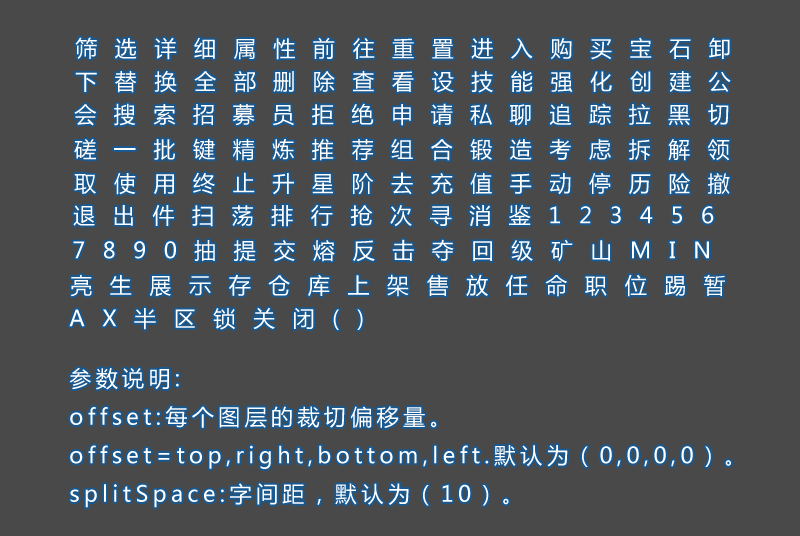
<style>
.page{position:relative;width:800px;height:536px;background:#494949}
.page>*{position:absolute;margin:0}
.t1{font:22px "MicrosoftYaHei";letter-spacing:0.8em;color:#ffffff}
.t2{font:22px "MicrosoftYaHei";letter-spacing:0.2em;color:#ffffff}
</style>
<div class="page">
<p class="t1" style="left:75px;top:37px;width:655px;height:23px">筛选详细属性前往重置进入购买宝石卸</p>
<p class="t1" style="left:75px;top:71px;width:656px;height:22px">下替换全部删除查看设技能强化创建公</p>
<p class="t1" style="left:74px;top:103px;width:655px;height:23px">会搜索招募员拒绝申请私聊追踪拉黑切</p>
<p class="t1" style="left:74px;top:138px;width:656px;height:23px">磋一批键精炼推荐组合锻造考虑拆解领</p>
<p class="t1" style="left:74px;top:172px;width:656px;height:23px">取使用终止升星阶去充值手动停历险撤</p>
<p class="t1" style="left:73px;top:204px;width:641px;height:23px">退出件扫荡排行抢次寻消鉴123456</p>
<p class="t1" style="left:73px;top:239px;width:636px;height:23px">7890抽提交熔反击夺回级矿山MIN</p>
<p class="t1" style="left:70px;top:274px;width:655px;height:23px">亮生展示存仓库上架售放任命职位踢暂</p>
<p class="t1" style="left:69px;top:307px;width:294px;height:23px">AX半区锁关闭()</p>
<p class="t2" style="left:69px;top:367px;width:662px;height:141px">参数说明:<br>offset:每个图层的裁切偏移量。<br>offset=top,right,bottom,left.默认为（0,0,0,0）。<br>splitSpace:字间距，默认为（10）。</p>
</div>
